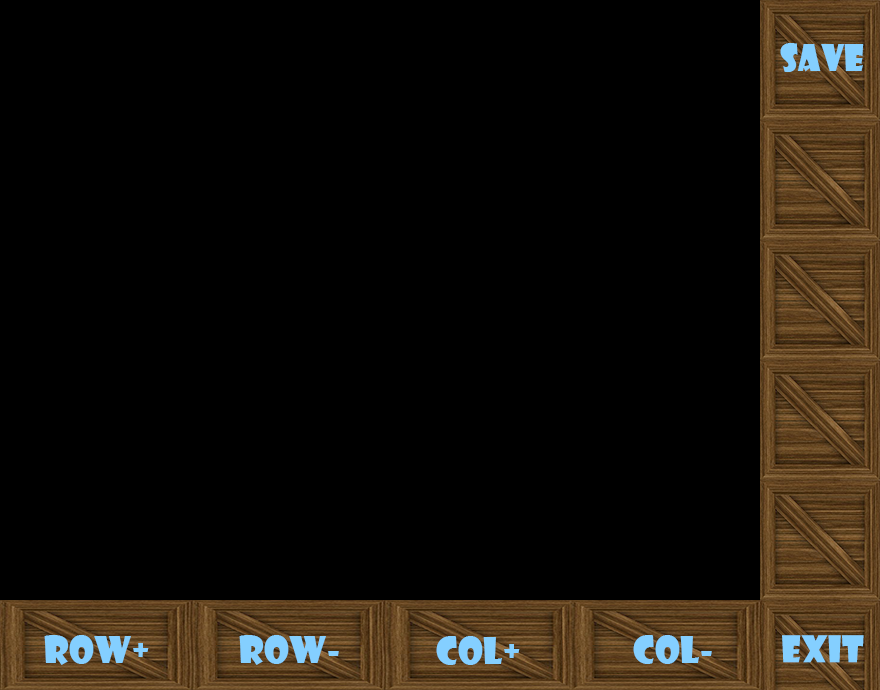
<style>
.page{position:relative;width:880px;height:690px;background:#000000}
.page>*{position:absolute;margin:0}
.t1{font:36px "ShowcardGothic-Reg";color:#84cfff}
</style>
<div class="page">
<p class="t1" style="left:780px;top:43px;width:84px;height:29px">SAVE</p>
<p class="t1" style="left:44px;top:635px;width:105px;height:30px">Row+</p>
<p class="t1" style="left:239px;top:635px;width:100px;height:30px">Row-</p>
<p class="t1" style="left:436px;top:636px;width:84px;height:29px">col+</p>
<p class="t1" style="left:633px;top:635px;width:79px;height:29px">col-</p>
<p class="t1" style="left:782px;top:635px;width:82px;height:28px">Exit</p>
</div>
